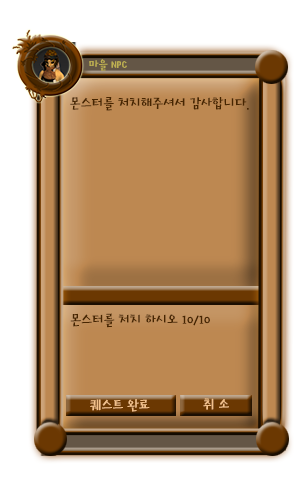
<style>
.page{position:relative;width:300px;height:500px;background:#ffffff}
.page>*{position:absolute;margin:0}
.t1{font:12px "HoonMakdR";color:#bdaf51}
.t2{font:14px "HoonMakdR";color:#472500}
.t3{font:14px "HoonMakdR";color:#f3c18b}
</style>
<div class="page">
<p class="t1" style="left:89px;top:59px;width:38px;height:12px">마을 NPC</p>
<p class="t2" style="left:70px;top:97px;width:179px;height:14px">몬스터를 처치해주셔서 감사합니다.</p>
<p class="t2" style="left:70px;top:313px;width:140px;height:15px">몬스터를 처치 하시오 10/10</p>
<p class="t3" style="left:203px;top:398px;width:26px;height:12px">취 소</p>
</div>
